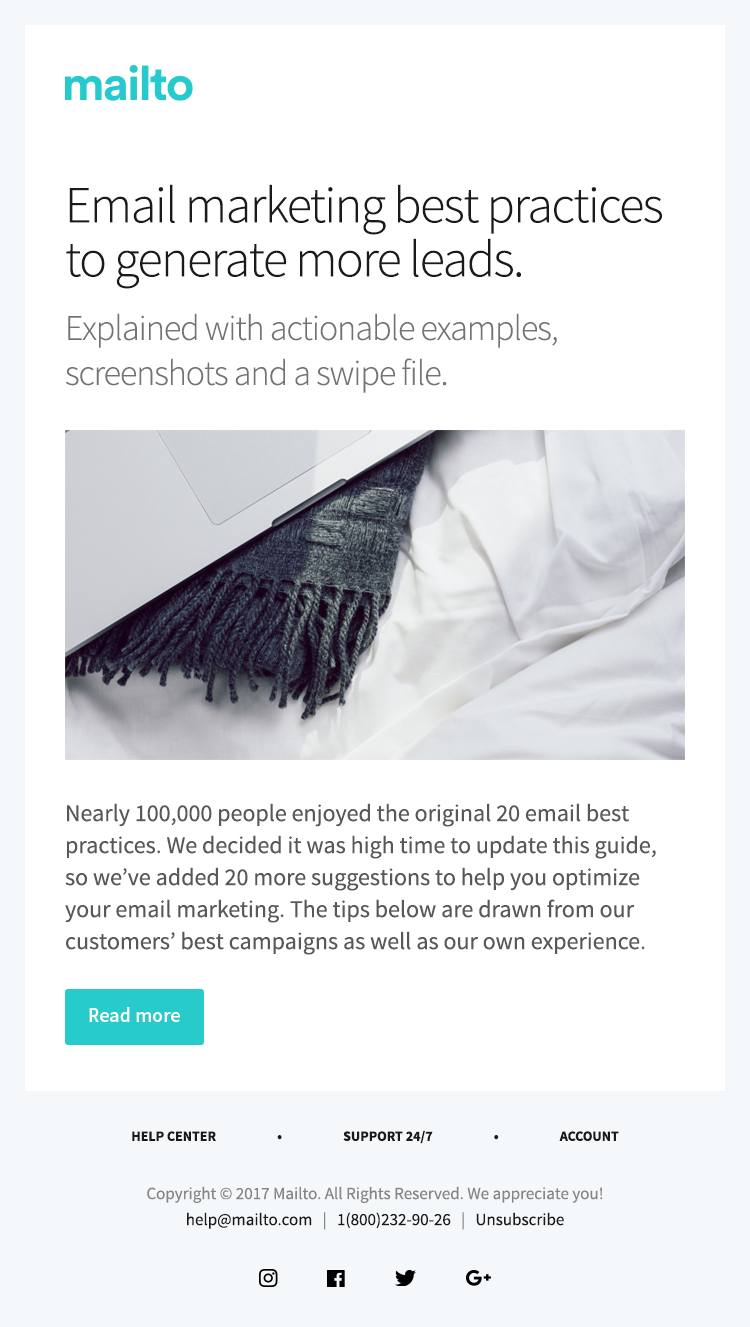
<style>
.page{position:relative;width:750px;height:1327px;background:#ffffff}
.page>*{position:absolute;margin:0}
.t1{font:52px/54px "SourceSansPro-Light";letter-spacing:-0.03em;color:#1a1a1a}
.t2{font:36px/45px "SourceSansPro-Light";letter-spacing:-0.03em;color:#737373}
.t3{font:24px/32px "SourceSansPro-Regular";color:#585858}
.t4{font:20px "SourceSansPro-Semibold";color:#ffffff}
.t5{font:14px "SourceSansPro-Bold";color:#1a1a1a}
.t6{font:17px/26px "SourceSansPro-Regular";color:#868686}
.t7{font:17px/26px "SourceSansPro-Regular";color:#1a1a1a}
</style>
<div class="page">
<p class="t1" style="left:66px;top:184px;width:596px;height:105px">Email marketing best practices to generate more leads.</p>
<p class="t2" style="left:66px;top:313px;width:491px;height:80px">Explained with actionable examples, screenshots and a swipe file.</p>
<p class="t3" style="left:65px;top:803px;width:591px;height:152px">Nearly 100,000 people enjoyed the original 20 email best practices. We decided it was high time to update this guide, so we’ve added 20 more suggestions to help you optimize your email marketing. The tips below are drawn from our customers’ best campaigns as well as our own experience.</p>
<p class="t4" style="left:89px;top:1007px;width:91px;height:15px">Read more</p>
<p class="t5" style="left:132px;top:1130px;width:487px;height:14px">HELP CENTER                     •                     SUPPORT 24/7                     •                     ACCOUNT</p>
<p class="t6" style="left:147px;top:1186px;width:456px;height:44px;text-align:center">Copyright © 2017 Mailto. All Rights Reserved. We appreciate you!<br><span class="t7">help@mailto.com </span>  |   <span class="t7">1(800)232-90-26 </span>  |   <span class="t7">Unsubscribe</span></p>
</div>
